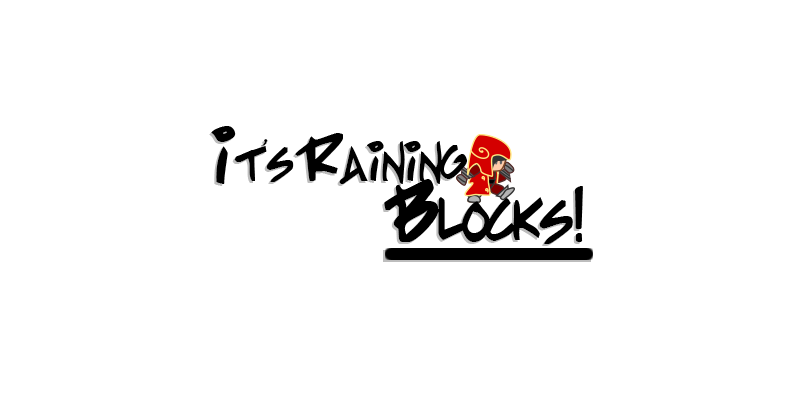
<style>
.page{position:relative;width:800px;height:400px;background:#ffffff}
.page>*{position:absolute;margin:0}
.t1{font:64px "PPHandwritingNormal";color:#000000}
.t2{font:64px "SoulCalibuR";color:#000000}
.t3{font:64px "PPHandwritingNormal"}
.t4{font:64px "SoulCalibuR"}
.t5{font:80px "PPHandwritingNormal";color:#000000}
</style>
<div class="page">
<p class="t1" style="left:211px;top:126px;width:256px;height:58px">It<span class="t2">’</span>s Raining</p>
<p class="t3" style="left:209px;top:128px;width:256px;height:58px">It<span class="t4">’</span>s Raining</p>
<p class="t5" style="left:382px;top:181px;width:199px;height:65px">Blocks!</p>
<p class="t5" style="left:384px;top:179px;width:199px;height:65px">Blocks!</p>
</div>
